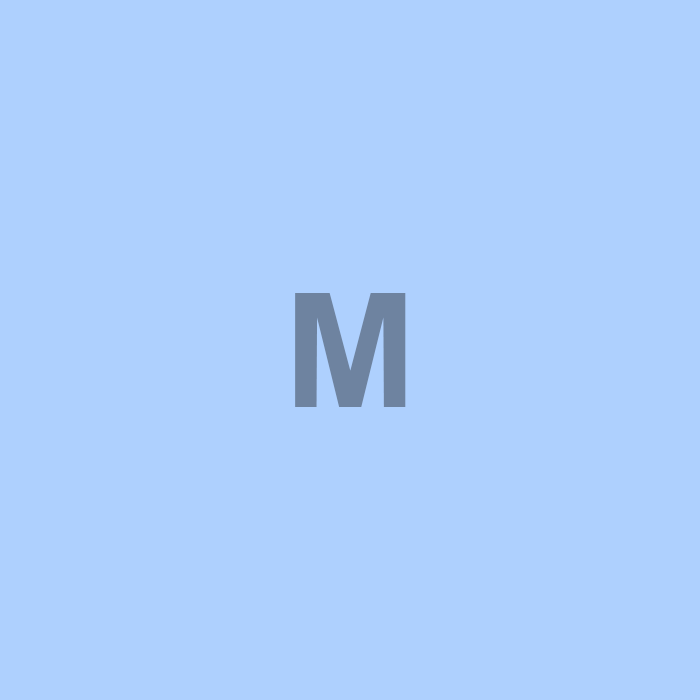
<style>
.page{position:relative;width:700px;height:700px;background:#aed0fe}
.page>*{position:absolute;margin:0}
.t1{font:158.8px "Arial-BoldMT";color:#6e83a0}
</style>
<div class="page">
<p class="t1" style="left:295px;top:293px;width:111px;height:114px">M</p>
</div>
